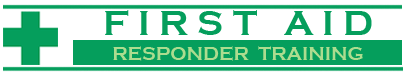
<style>
.page{position:relative;width:406px;height:74px;background:#ffffff}
.page>*{position:absolute;margin:0}
.t1{font:36px "CopperplateGothic-Bold";letter-spacing:0.25em;color:#059e5c}
.t2{font:19px "CopperplateGothic-Bold";color:#acdc8f}
</style>
<div class="page">
<p class="t1" style="left:105px;top:10px;width:267px;height:25px">FIRST AID</p>
<p class="t2" style="left:113px;top:46px;width:250px;height:15px">RESPONDER  TRAINING</p>
</div>
